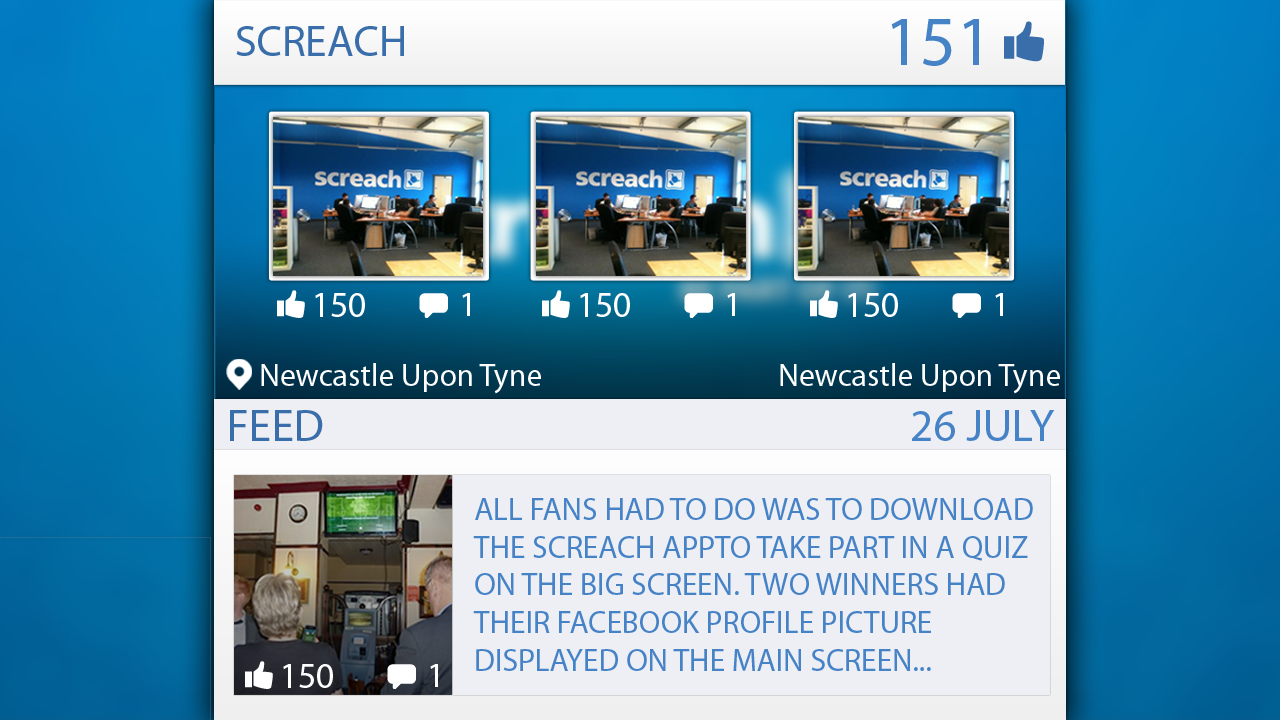
<style>
.page{position:relative;width:1280px;height:720px}
.page>*{position:absolute;margin:0}
.t1{font:43.9px "MyriadPro-Regular";color:#396eaa;text-transform:uppercase}
.t2{font:70.2px "MyriadPro-Regular";color:#4682c6}
.t3{font:35.7px "MyriadPro-Regular";color:#ffffff;text-transform:uppercase}
.t4{font:34.3px "MyriadPro-Regular";color:#ffffff;text-transform:uppercase}
.t5{font:31.6px "MyriadPro-Regular";color:#ffffff}
.t6{font:45.3px "MyriadPro-Regular";color:#396eaa}
.t7{font:45.3px "MyriadPro-Regular";color:#4682c6}
.t8{font:31.4px "MyriadPro-Regular";color:#4682c6;text-transform:uppercase}
</style>
<div class="page">
<p class="t1" style="left:236px;top:26px;width:168px;height:30px">Screach</p>
<p class="t2" style="left:891px;top:19px;width:88px;height:47px">151</p>
<p class="t3" style="left:315px;top:293px;width:50px;height:24px">150</p>
<p class="t4" style="left:462px;top:293px;width:8px;height:23px">1</p>
<p class="t3" style="left:580px;top:293px;width:50px;height:24px">150</p>
<p class="t4" style="left:727px;top:293px;width:8px;height:23px">1</p>
<p class="t3" style="left:848px;top:293px;width:50px;height:24px">150</p>
<p class="t4" style="left:995px;top:293px;width:8px;height:23px">1</p>
<p class="t5" style="left:261px;top:363px;width:280px;height:31px">Newcastle Upon Tyne</p>
<p class="t5" style="left:780px;top:363px;width:280px;height:31px">Newcastle Upon Tyne</p>
<p class="t6" style="left:230px;top:410px;width:93px;height:31px">FEED</p>
<p class="t7" style="left:912px;top:410px;width:143px;height:31px">26 JULY</p>
<p class="t8" style="left:473px;top:498px;width:560px;height:173px">All fans had to do was to download <br>the Screach appto take part in a quiz <br>on the big screen. Two winners had <br>their Facebook profile picture <br>displayed on the main screen...</p>
<p class="t3" style="left:283px;top:664px;width:50px;height:24px">150</p>
<p class="t4" style="left:430px;top:664px;width:8px;height:23px">1</p>
</div>
